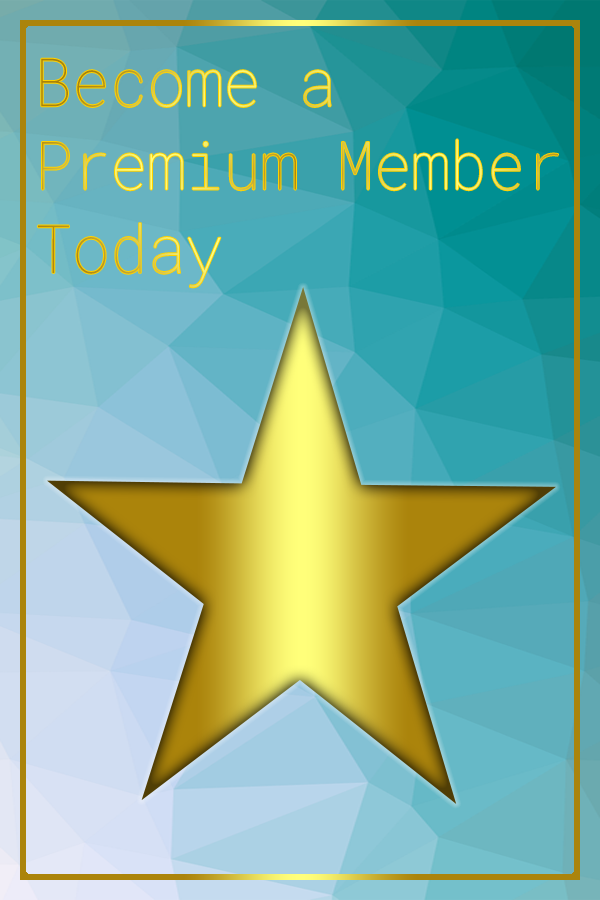
<style>
.page{position:relative;width:600px;height:900px}
.page>*{position:absolute;margin:0}
.t1{font:66.7px/83.3px "RobotoMonoForPowerline-Thin";scale:0.94 1}
</style>
<div class="page">
<p class="t1" style="left:38px;top:58px;width:520px;height:230px">Become a <br>Premium Member<br>Today</p>
</div>
